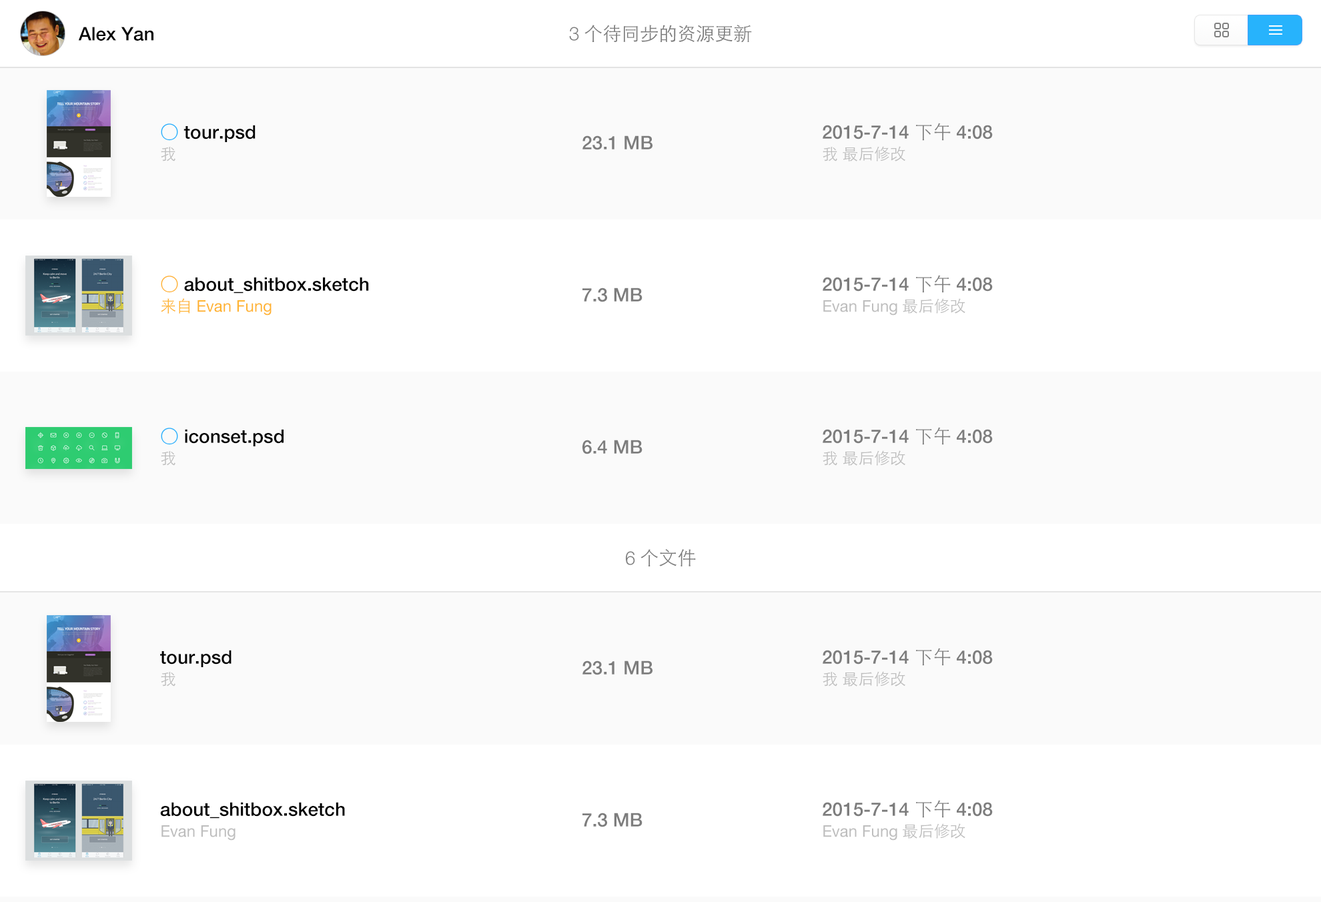
<style>
.page{position:relative;width:1321px;height:902px;background:#fafafa}
.page>*{position:absolute;margin:0}
.t1{font:18.7px "HelveticaNeue-Medium";color:#000000}
.t2{font:18.7px "STHeitiSC-Light";color:#7d7d7d}
.t3{font:18.7px "HelveticaNeue-Light";color:#7d7d7d}
.t4{font:18.7px "STHeitiSC-Light";color:#27b3fc}
.t5{font:18.7px "HelveticaNeue-Medium";color:#7d7d7d}
.t6{font:16px "STHeitiSC-Light";color:#bebebe}
.t7{font:18.7px "STHeitiSC-Light";color:#ffb432}
.t8{font:16px "HelveticaNeue";color:#ffb432}
.t9{font:16px "STHeitiSC-Light";color:#ffb432}
.t10{font:16px "HelveticaNeue";color:#bebebe}
</style>
<div class="page">
<p class="t1" style="left:78px;top:27px;width:76px;height:14px">Alex Yan</p>
<p class="t2" style="left:569px;top:25px;width:183px;height:18px"><span class="t3">3</span> 个待同步的资源更新</p>
<p class="t1" style="left:161px;top:123px;width:95px;height:19px"><span class="t4">○</span> tour.psd</p>
<p class="t5" style="left:823px;top:123px;width:170px;height:18px">2015-7-14 <span class="t2">下午 </span>4:08</p>
<p class="t5" style="left:583px;top:135px;width:70px;height:15px">23.1 MB</p>
<p class="t6" style="left:161px;top:147px;width:15px;height:15px">我</p>
<p class="t6" style="left:823px;top:146px;width:83px;height:16px">我 最后修改</p>
<p class="t1" style="left:161px;top:276px;width:208px;height:18px"><span class="t7">○</span> about_shitbox.sketch</p>
<p class="t5" style="left:823px;top:275px;width:170px;height:18px">2015-7-14 <span class="t2">下午 </span>4:08</p>
<p class="t5" style="left:583px;top:288px;width:60px;height:14px">7.3 MB</p>
<p class="t8" style="left:161px;top:298px;width:111px;height:18px"><span class="t9">来自 </span>Evan Fung</p>
<p class="t10" style="left:824px;top:298px;width:142px;height:18px">Evan Fung<span class="t6"> 最后修改</span></p>
<p class="t1" style="left:161px;top:428px;width:123px;height:19px"><span class="t4">○</span> iconset.psd</p>
<p class="t5" style="left:823px;top:427px;width:170px;height:18px">2015-7-14 <span class="t2">下午 </span>4:08</p>
<p class="t5" style="left:583px;top:440px;width:60px;height:15px">6.4 MB</p>
<p class="t6" style="left:161px;top:451px;width:15px;height:15px">我</p>
<p class="t6" style="left:823px;top:451px;width:83px;height:15px">我 最后修改</p>
<p class="t2" style="left:626px;top:549px;width:70px;height:18px"><span class="t3">6</span> 个文件</p>
<p class="t1" style="left:160px;top:650px;width:72px;height:17px">tour.psd</p>
<p class="t5" style="left:823px;top:648px;width:170px;height:18px">2015-7-14 <span class="t2">下午 </span>4:08</p>
<p class="t5" style="left:583px;top:661px;width:70px;height:14px">23.1 MB</p>
<p class="t6" style="left:161px;top:672px;width:15px;height:15px">我</p>
<p class="t6" style="left:823px;top:671px;width:83px;height:16px">我 最后修改</p>
<p class="t1" style="left:160px;top:802px;width:185px;height:17px">about_shitbox.sketch</p>
<p class="t5" style="left:823px;top:800px;width:170px;height:18px">2015-7-14 <span class="t2">下午 </span>4:08</p>
<p class="t5" style="left:583px;top:813px;width:60px;height:15px">7.3 MB</p>
<p class="t10" style="left:162px;top:826px;width:74px;height:15px">Evan Fung</p>
<p class="t10" style="left:824px;top:824px;width:142px;height:17px">Evan Fung<span class="t6"> 最后修改</span></p>
</div>
